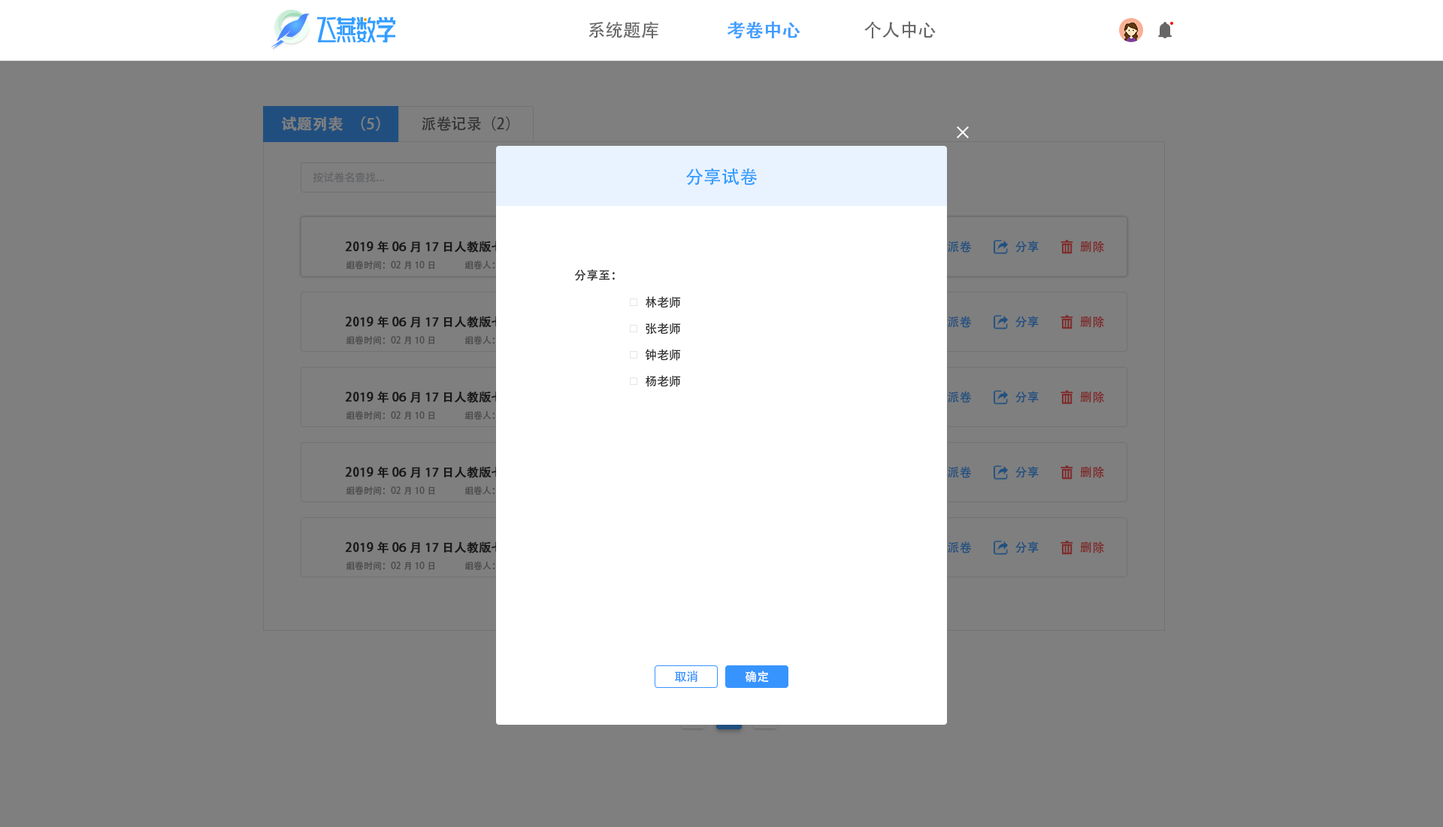
<style>
.page{position:relative;width:1443px;height:827px;background:#7f7f7f}
.page>*{position:absolute;margin:0}
.t1{font:18px "AdobeHeitiStd-Regular";color:#666666}
.t2{font:18px "AdobeHeitiStd-Regular";color:#409eff;font-weight:bold}
.t3{font:15px "AdobeHeitiStd-Regular";color:#7f7f7f;font-weight:bold}
.t4{font:15px "AdobeHeitiStd-Regular";color:#333333}
.t5{font:18px "AdobeHeitiStd-Regular";color:#339dff}
.t6{font:12px "AdobeHeitiStd-Regular";color:#204f7f}
.t7{font:12px "AdobeHeitiStd-Regular";color:#7f2a2a}
.t8{font:9px "AdobeHeitiStd-Regular";color:#4c4c4c}
.t9{font:12px "AdobeHeitiStd-Regular";color:#333333}
.t10{font:12px "AdobeHeitiStd-Regular";color:#3794ff}
.t11{font:12px "AdobeHeitiStd-Regular";color:#ffffff}
</style>
<div class="page">
<p class="t1" style="left:588px;top:22px;width:70px;height:16px">系统题库</p>
<p class="t2" style="left:727px;top:21px;width:73px;height:18px">考卷中心</p>
<p class="t1" style="left:864px;top:21px;width:71px;height:17px">个人中心</p>
<p class="t3" style="left:281px;top:116px;width:99px;height:15px">试题列表（5）</p>
<p class="t4" style="left:422px;top:116px;width:87px;height:15px">派卷记录（2）</p>
<p class="t5" style="left:686px;top:168px;width:71px;height:17px">分享试卷</p>
<p class="t6" style="left:948px;top:240px;width:23px;height:12px">派卷</p>
<p class="t6" style="left:1015px;top:240px;width:23px;height:12px">分享</p>
<p class="t7" style="left:1080px;top:240px;width:25px;height:12px">删除</p>
<p class="t8" style="left:346px;top:260px;width:89px;height:10px">组卷时间：02月10日</p>
<p class="t9" style="left:574px;top:269px;width:41px;height:12px">分享至：</p>
<p class="t9" style="left:645px;top:296px;width:36px;height:12px">林老师</p>
<p class="t6" style="left:948px;top:316px;width:23px;height:12px">派卷</p>
<p class="t6" style="left:1015px;top:316px;width:23px;height:12px">分享</p>
<p class="t7" style="left:1080px;top:316px;width:25px;height:12px">删除</p>
<p class="t9" style="left:645px;top:322px;width:36px;height:12px">张老师</p>
<p class="t8" style="left:346px;top:335px;width:89px;height:10px">组卷时间：02月10日</p>
<p class="t9" style="left:645px;top:349px;width:36px;height:12px">钟老师</p>
<p class="t9" style="left:645px;top:375px;width:36px;height:12px">杨老师</p>
<p class="t6" style="left:948px;top:391px;width:23px;height:12px">派卷</p>
<p class="t6" style="left:1015px;top:391px;width:23px;height:12px">分享</p>
<p class="t7" style="left:1080px;top:391px;width:25px;height:12px">删除</p>
<p class="t8" style="left:346px;top:410px;width:89px;height:10px">组卷时间：02月10日</p>
<p class="t6" style="left:948px;top:466px;width:23px;height:12px">派卷</p>
<p class="t6" style="left:1015px;top:466px;width:23px;height:12px">分享</p>
<p class="t7" style="left:1080px;top:466px;width:25px;height:12px">删除</p>
<p class="t8" style="left:346px;top:485px;width:89px;height:10px">组卷时间：02月10日</p>
<p class="t6" style="left:948px;top:541px;width:23px;height:12px">派卷</p>
<p class="t6" style="left:1015px;top:541px;width:23px;height:12px">分享</p>
<p class="t7" style="left:1080px;top:541px;width:25px;height:12px">删除</p>
<p class="t8" style="left:346px;top:561px;width:89px;height:9px">组卷时间：02月10日</p>
<p class="t10" style="left:675px;top:670px;width:23px;height:12px">取消</p>
<p class="t11" style="left:745px;top:670px;width:24px;height:12px">确定</p>
</div>
